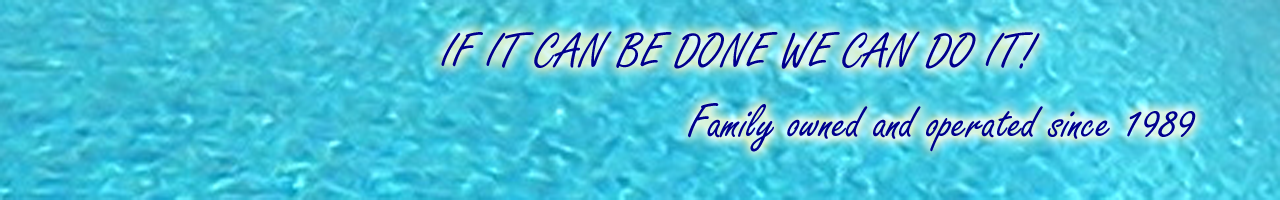
<style>
.page{position:relative;width:1280px;height:200px}
.page>*{position:absolute;margin:0}
.t1{font:51.8px "FreestyleScript-Regular";color:#00008e}
</style>
<div class="page">
<p class="t1" style="left:441px;top:31px;width:599px;height:38px">IF IT CAN BE DONE WE CAN DO IT!</p>
<p class="t1" style="left:688px;top:103px;width:508px;height:49px">Family owned and operated since 1989</p>
</div>
